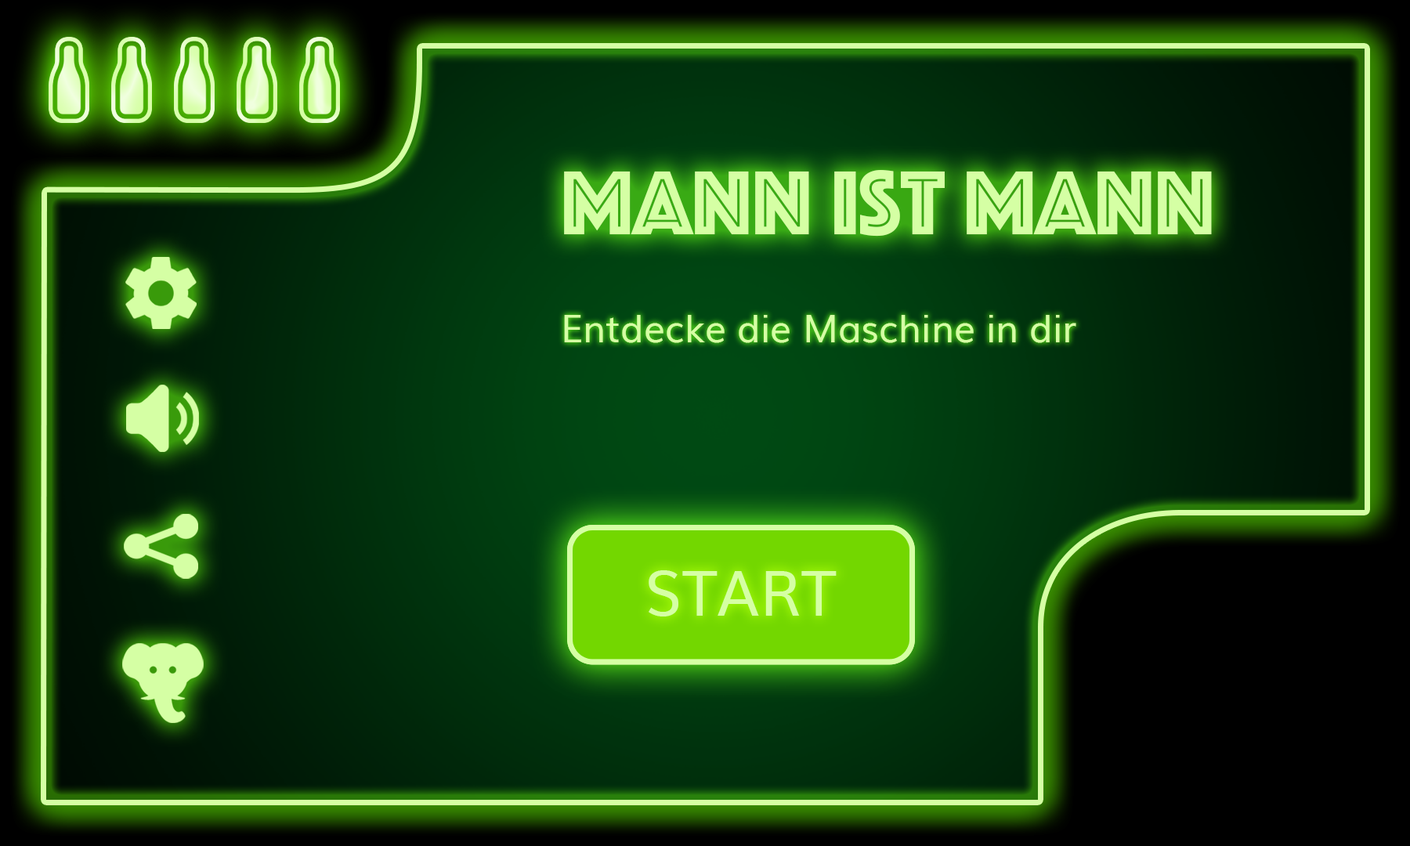
<style>
.page{position:relative;width:1410px;height:846px}
.page>*{position:absolute;margin:0}
.t1{font:94px "Phosphate-Inline";color:#d5ffa4}
.t2{font:37.6px "Muli";color:#d5ffa4}
.t3{font:62.5px "Muli";color:#d5ffa4}
</style>
<div class="page">
<p class="t1" style="left:564px;top:170px;width:648px;height:67px">Mann ist Mann</p>
<p class="t2" style="left:564px;top:315px;width:512px;height:28px">Entdecke die Maschine in dir</p>
<p class="t3" style="left:648px;top:570px;width:188px;height:46px">START</p>
</div>
